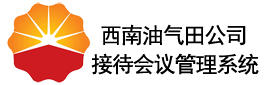
<style>
.page{position:relative;width:270px;height:85px;background:#ffffff}
.page>*{position:absolute;margin:0}
.t1{font:22px "SimHei";letter-spacing:-0.05em;color:#000000}
</style>
<div class="page">
<p class="t1" style="left:101px;top:24px;width:145px;height:22px">西南油气田公司</p>
<p class="t1" style="left:91px;top:53px;width:168px;height:22px">接待会议管理系统</p>
</div>
